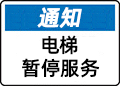
<style>
.page{position:relative;width:120px;height:86px;background:#ffffff}
.page>*{position:absolute;margin:0}
.t1{font:22px "AlibabaPuHuiTiM";color:#ffffff;font-weight:bold;font-style:italic}
.t2{font:20px "AlibabaPuHuiTiM";color:#000000}
</style>
<div class="page">
<p class="t1" style="left:37px;top:7px;width:45px;height:21px">通知</p>
<p class="t2" style="left:42px;top:35px;width:36px;height:20px">电梯</p>
<p class="t2" style="left:22px;top:58px;width:78px;height:20px">暂停服务</p>
</div>
